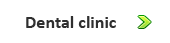
<style>
.page{position:relative;width:170px;height:43px;background:#ffffff}
.page>*{position:absolute;margin:0}
.t1{font:18px "Calibri-Bold";color:#2f2f2f}
</style>
<div class="page">
<p class="t1" style="left:26px;top:16px;width:90px;height:12px">Dental clinic</p>
</div>
